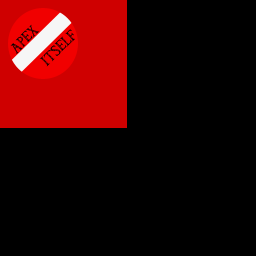
<style>
.page{position:relative;width:256px;height:256px;background:#000000}
.page>*{position:absolute;margin:0}
.t1{font:11.8px "Triforce";color:#000000}
</style>
<div class="page">
<p class="t1" style="left:10px;top:24px;width:29px;height:30px;rotate:-45deg">APEX</p>
<p class="t1" style="left:40px;top:29px;width:35px;height:38px;rotate:-44deg">ITSELF</p>
</div>
